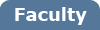
<style>
.page{position:relative;width:100px;height:30px;background:#55779a}
.page>*{position:absolute;margin:0}
.t1{font:18px "Verdana-Bold";color:#ffffff}
</style>
<div class="page">
<p class="t1" style="left:15px;top:7px;width:72px;height:18px">Faculty</p>
</div>
